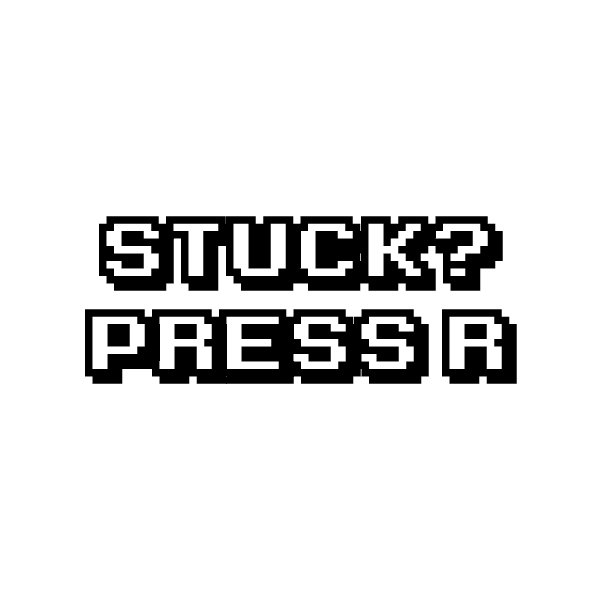
<style>
.page{position:relative;width:600px;height:600px;background:#ffffff}
.page>*{position:absolute;margin:0}
.t1{font:76.5px/93px "KarmaticArcade";color:#000000}
</style>
<div class="page">
<p class="t1" style="left:85px;top:216px;width:432px;height:168px;text-align:center">Stuck?<br>Press R</p>
</div>
